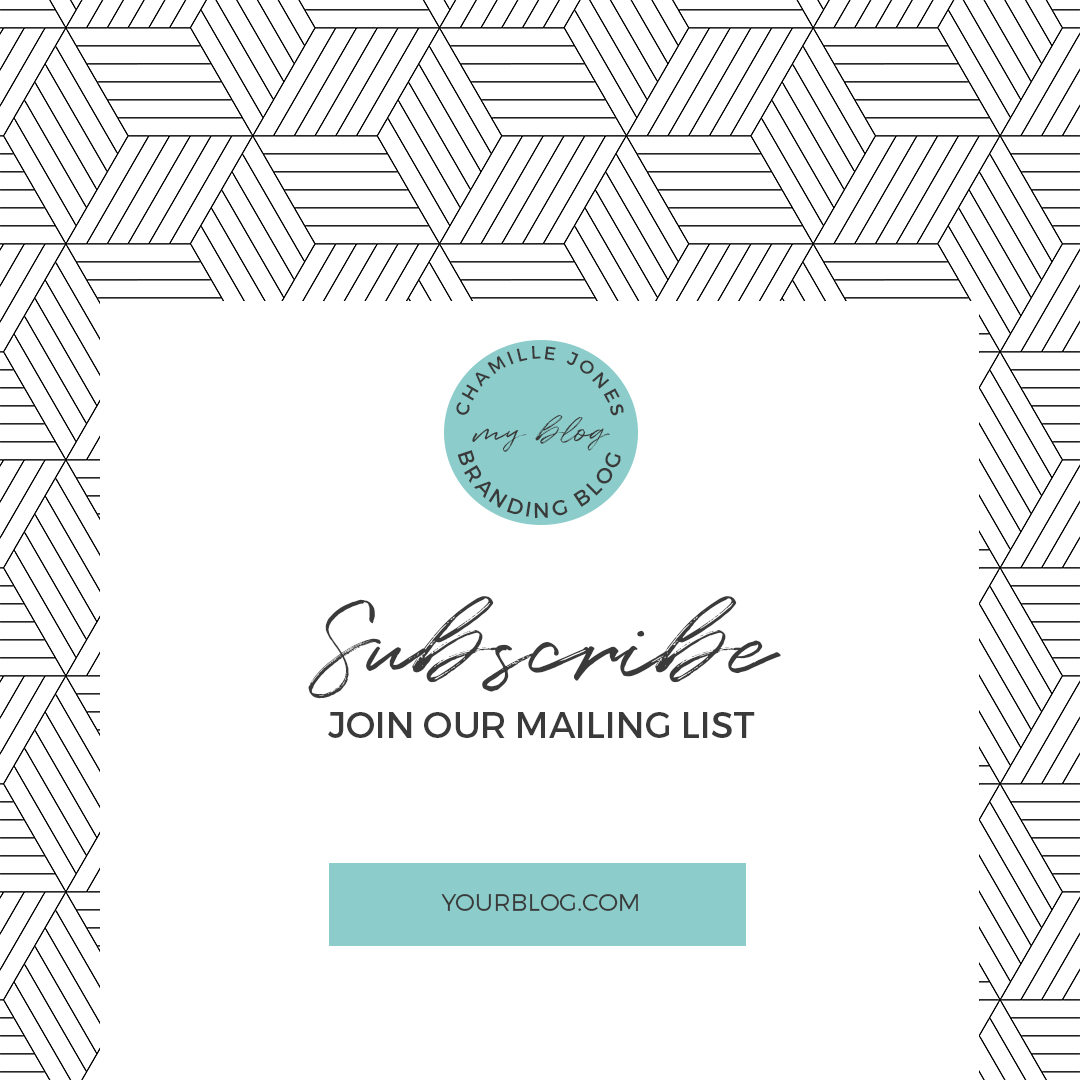
<style>
.page{position:relative;width:1080px;height:1080px;background:#ffffff}
.page>*{position:absolute;margin:0}
.t1{font:18.5px "Montserrat-Regular";letter-spacing:0.16em;color:#3a3a3a;text-transform:uppercase}
.t2{font:36px "Quentin";color:#3a3a3a}
.t3{font:21.3px "Montserrat-Regular";letter-spacing:0.16em;color:#3a3a3a;text-transform:uppercase}
.t4{font:108px "Quentin";color:#3a3a3a}
.t5{font:36px "Montserrat-Regular";color:#3a3a3a}
.t6{font:24px "Montserrat-Light";color:#3a3a3a}
</style>
<div class="page">
<p class="t1" style="left:456px;top:346px;width:168px;height:70px;text-align:center">Chamille jones</p>
<p class="t2" style="left:472px;top:415px;width:138px;height:37px">my blog</p>
<p class="t3" style="left:457px;top:450px;width:164px;height:68px;text-align:center">branding BLOG</p>
<p class="t4" style="left:308px;top:596px;width:473px;height:103px">Subscribe</p>
<p class="t5" style="left:328px;top:712px;width:427px;height:26px">JOIN OUR MAILING LIST</p>
<p class="t6" style="left:441px;top:894px;width:197px;height:17px">YOURBLOG.COM</p>
</div>
